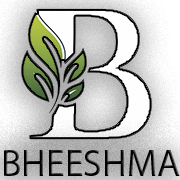
<style>
.page{position:relative;width:180px;height:180px}
.page>*{position:absolute;margin:0}
.t1{font:38px "MyriadPro-Regular";color:#000000}
</style>
<div class="page">
<p class="t1" style="left:4px;top:150px;width:176px;height:26px">BHEESHMA</p>
</div>
